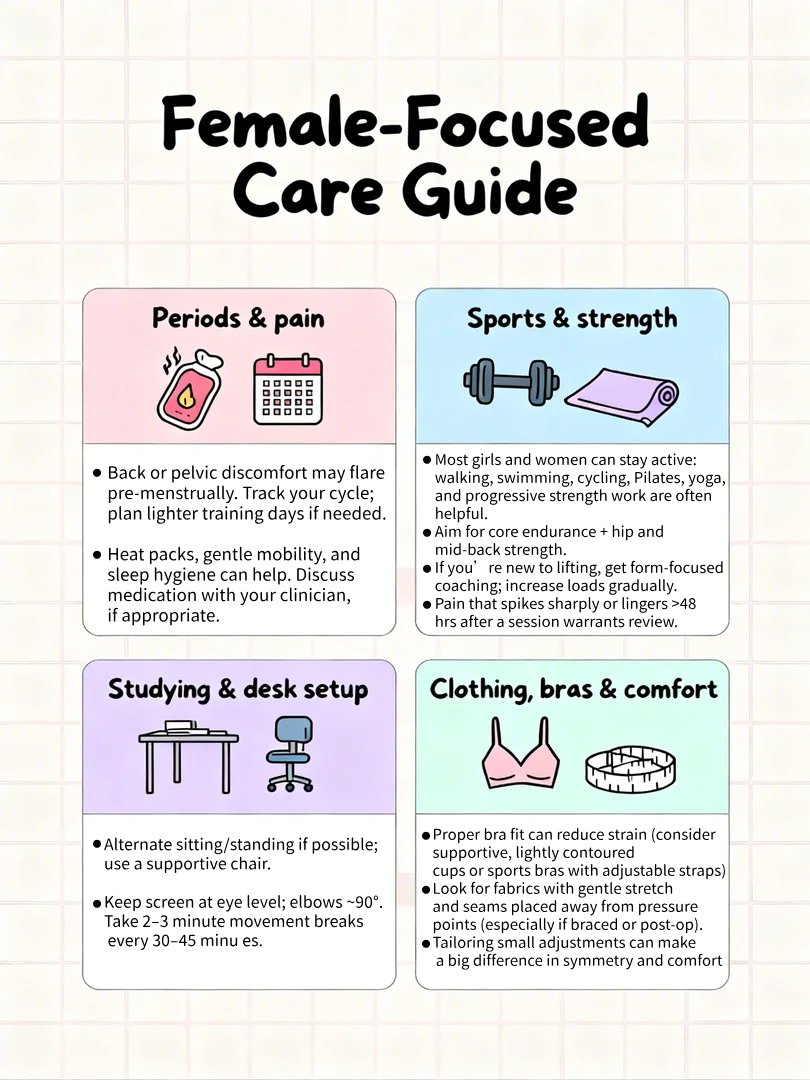
<style>
.page{position:relative;width:810px;height:1080px}
.page>*{position:absolute;margin:0}
.t1{font:9px "Resource-Han-Rounded-CN-Regular";color:#000000}
.t2{font:15px "Resource-Han-Rounded-CN-Regular";color:#000000}
.t3{font:17px "Resource-Han-Rounded-CN-Regular";color:#000000}
.t4{font:16px "Resource-Han-Rounded-CN-Regular";color:#000000}
</style>
<div class="page">
<p class="t1" style="left:422px;top:455px;width:10px;height:9px">●</p>
<p class="t2" style="left:434px;top:453px;width:291px;height:175px">Most girls and women can stay active: <br>walking, swimming, cycling, Pilates, yoga,<br>and progressive strength work are often<br>helpful.<br>Aim for core endurance + hip and<br>mid-back strength.<br>If you’re new to lifting, get form-focused<br>coaching; increase loads gradually.<br>Pain that spikes sharply or lingers &gt;48 <br>hrs after a session warrants review.</p>
<p class="t1" style="left:92px;top:468px;width:10px;height:9px">●</p>
<p class="t3" style="left:107px;top:464px;width:279px;height:162px">Back or pelvic discomfort may flare<br>pre-menstrually. Track your cycle;<br>plan lighter training days if needed.<br><br>Heat packs, gentle mobility, and <br>sleep hygiene can help. Discuss<br>medication with your clinician, <br>if appropriate.</p>
<p class="t1" style="left:422px;top:528px;width:10px;height:9px">●</p>
<p class="t1" style="left:92px;top:550px;width:10px;height:9px">●</p>
<p class="t1" style="left:422px;top:564px;width:10px;height:9px">●</p>
<p class="t1" style="left:422px;top:600px;width:10px;height:9px">●</p>
<p class="t1" style="left:421px;top:831px;width:10px;height:9px">●</p>
<p class="t2" style="left:432px;top:827px;width:293px;height:143px">Proper bra fit can reduce strain (consider<br>supportive, lightly contoured<br>cups or sports bras with adjustable straps)<br>Look for fabrics with gentle stretch <br>and seams placed away from pressure<br>points (especially if braced or post-op).<br>Tailoring small adjustments can make<br> a big difference in symmetry and comfort</p>
<p class="t1" style="left:92px;top:839px;width:10px;height:9px">●</p>
<p class="t4" style="left:104px;top:837px;width:279px;height:113px">Alternate sitting/standing if possible; <br>use a supportive chair.<br><br>Keep screen at eye level; elbows ~90°. <br>Take 2–3 minute movement breaks<br> every 30–45 minu es.</p>
<p class="t1" style="left:421px;top:885px;width:10px;height:9px">●</p>
<p class="t1" style="left:92px;top:899px;width:10px;height:9px">●</p>
<p class="t1" style="left:421px;top:939px;width:10px;height:9px">●</p>
</div>
